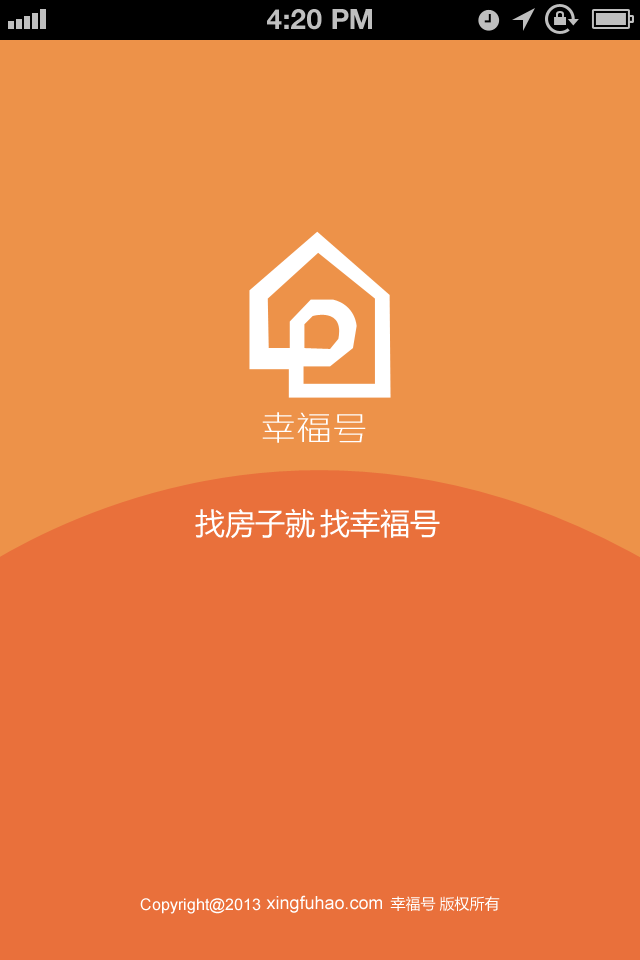
<style>
.page{position:relative;width:640px;height:960px;background:#e9703b}
.page>*{position:absolute;margin:0}
.t1{font:28px "HelveticaNeue-Bold";color:#bfbfbf;text-transform:uppercase}
.t2{font:36px "ZHSRXT--GBK1-0";color:#ffffff}
.t3{font:30px "MicrosoftYaHei";color:#ffffff}
.t4{font:16px "ArialMT";color:#ffffff}
.t5{font:18px "ArialMT";color:#ffffff}
.t6{font:15px "MicrosoftYaHei";color:#ffffff}
</style>
<div class="page">
<p class="t1" style="left:267px;top:9px;width:105px;height:21px">4:20 PM</p>
<p class="t2" style="left:262px;top:412px;width:104px;height:31px">幸福号</p>
<p class="t3" style="left:195px;top:508px;width:120px;height:31px">找房子就</p>
<p class="t3" style="left:320px;top:509px;width:120px;height:29px">找幸福号</p>
<p class="t4" style="left:140px;top:898px;width:121px;height:16px">Copyright@2013</p>
<p class="t5" style="left:266px;top:895px;width:116px;height:18px">xingfuhao.com</p>
<p class="t6" style="left:390px;top:896px;width:110px;height:15px">幸福号 版权所有</p>
</div>
